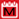
<style>
.page{position:relative;width:19px;height:19px}
.page>*{position:absolute;margin:0}
.t1{font:10.2px "OpenSans-Light";color:#000000;font-weight:bold;scale:1.44 1}
</style>
<div class="page">
<p class="t1" style="left:4px;top:7px;width:11px;height:9px">M</p>
</div>
